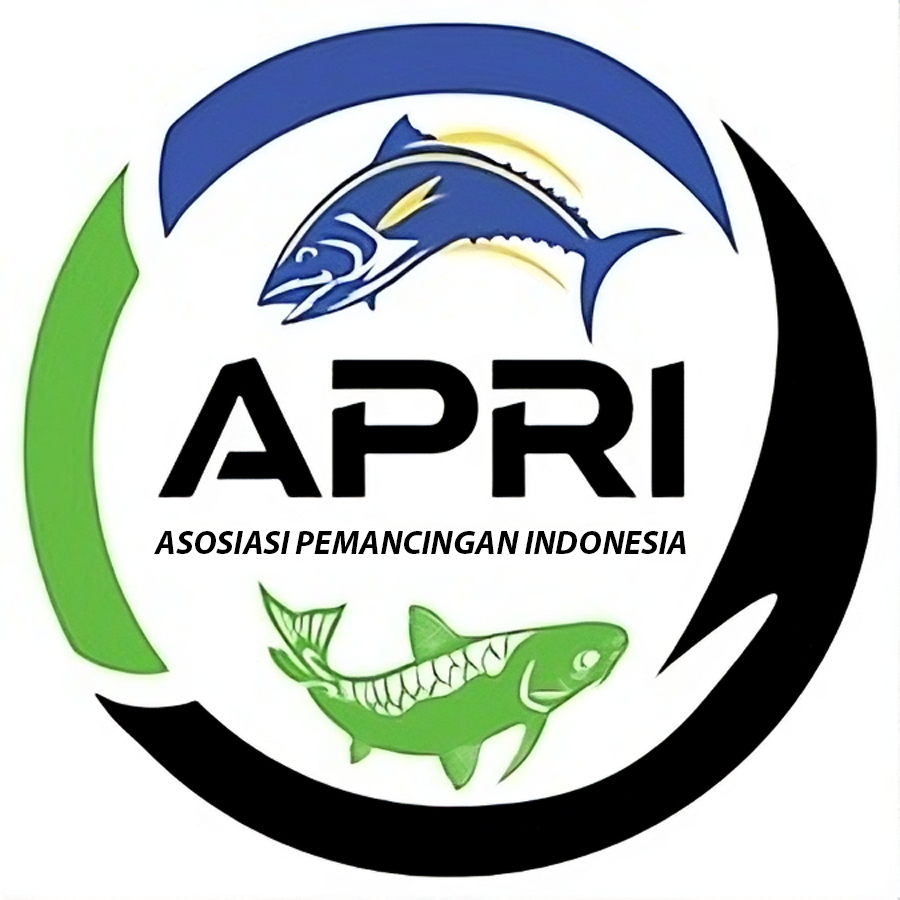
<style>
.page{position:relative;width:900px;height:900px;background:#ffffff}
.page>*{position:absolute;margin:0}
.t1{font:33.4px "MyriadPro-BoldIt";color:#000000}
</style>
<div class="page">
<p class="t1" style="left:154px;top:531px;width:532px;height:23px">ASOSIASI PEMANCINGAN INDONESIA</p>
</div>
